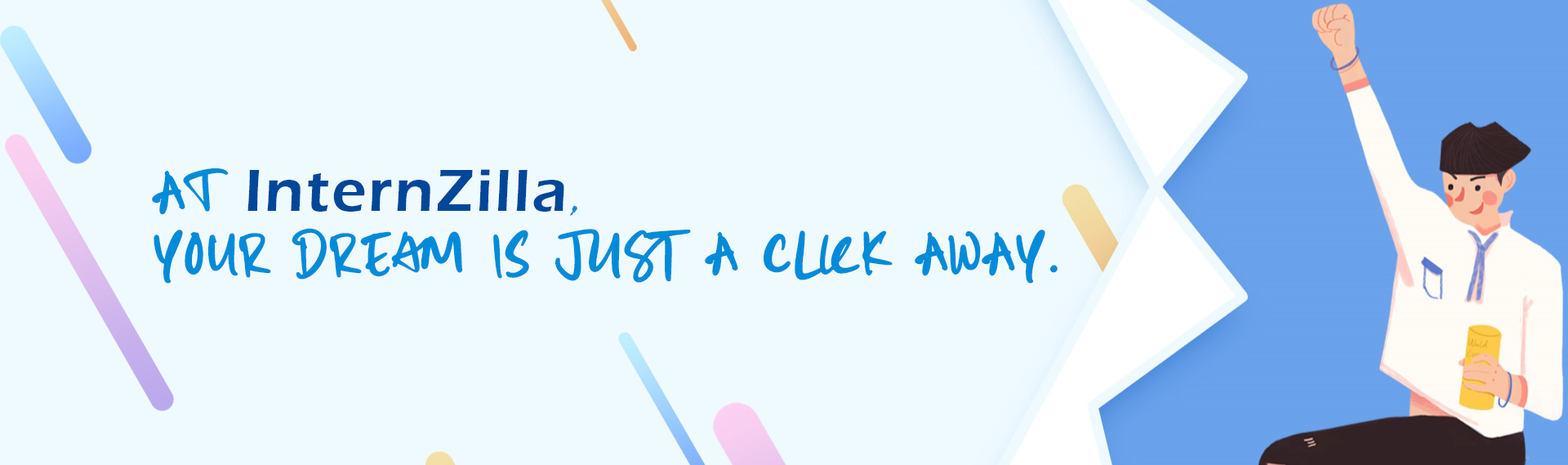
<style>
.page{position:relative;width:1568px;height:465px;background:#effafe}
.page>*{position:absolute;margin:0}
.t1{font:61.2px/61.2px "BlessingandStruggleSemiBold";letter-spacing:0.04em;color:#008bd9}
.t2{font:61.2px/61.2px "ErasITC-Demi";letter-spacing:0.04em;color:#004799}
.t3{font:61.2px/61.2px "BlackadderITC-Regular";letter-spacing:0.04em;color:#008bd9}
</style>
<div class="page">
<p class="t1" style="left:152px;top:167px;width:906px;height:116px">At <span class="t2">InternZilla</span><span class="t3">, <br></span>your dream is just a click away.</p>
</div>
